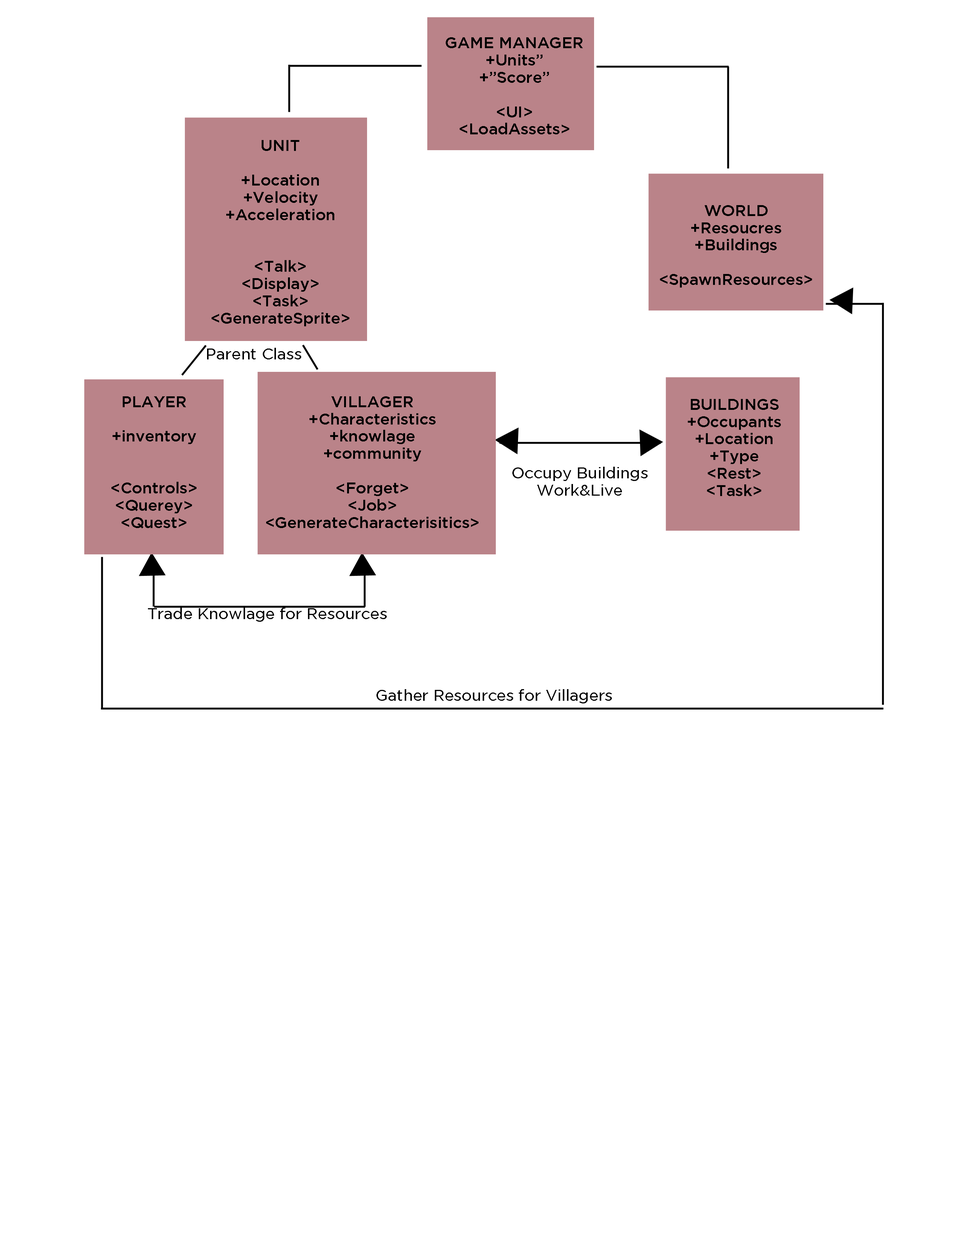
<style>
.page{position:relative;width:960px;height:1242px;background:#ffffff}
.page>*{position:absolute;margin:0}
.t1{font:15.7px/17.3px "GothamMedium";color:#000000}
.t2{font:15.7px "GothamBook";color:#000000}
.t3{font:15.7px/17.3px "GothamBook";color:#000000}
</style>
<div class="page">
<p class="t1" style="left:446px;top:37px;width:137px;height:97px;text-align:center">GAME MANAGER<br>+Units”<br>+”Score”<br><br>&lt;UI&gt;<br>&lt;LoadAssets&gt;</p>
<p class="t1" style="left:212px;top:140px;width:137px;height:186px;text-align:center">UNIT<br><br>+Location<br>+Velocity<br>+Acceleration<br><br><br>&lt;Talk&gt;<br>&lt;Display&gt;<br>&lt;Task&gt;<br>&lt;GenerateSprite&gt;</p>
<p class="t1" style="left:660px;top:205px;width:152px;height:83px;text-align:center">WORLD<br>+Resoucres<br>+Buildings<br><br>&lt;SpawnResources&gt;</p>
<p class="t2" style="left:207px;top:348px;width:94px;height:11px">Parent Class</p>
<p class="t1" style="left:111px;top:396px;width:85px;height:133px;text-align:center">PLAYER<br><br>+inventory<br><br><br>&lt;Controls&gt;<br>&lt;Querey&gt;<br>&lt;Quest&gt;</p>
<p class="t1" style="left:266px;top:396px;width:212px;height:132px;text-align:center">VILLAGER<br>+Characteristics<br>+knowlage<br>+community<br><br>&lt;Forget&gt;<br>&lt;Job&gt;<br>&lt;GenerateCharacterisitics&gt;</p>
<p class="t1" style="left:688px;top:399px;width:93px;height:97px;text-align:center">BUILDINGS<br>+Occupants<br>+Location<br>+Type<br>&lt;Rest&gt;<br>&lt;Task&gt;</p>
<p class="t3" style="left:512px;top:467px;width:135px;height:29px;text-align:center">Occupy Buildings<br>Work&amp;Live</p>
<p class="t2" style="left:148px;top:608px;width:239px;height:14px">Trade Knowlage for Resources</p>
<p class="t2" style="left:376px;top:689px;width:236px;height:15px">Gather Resources for Villagers</p>
</div>
